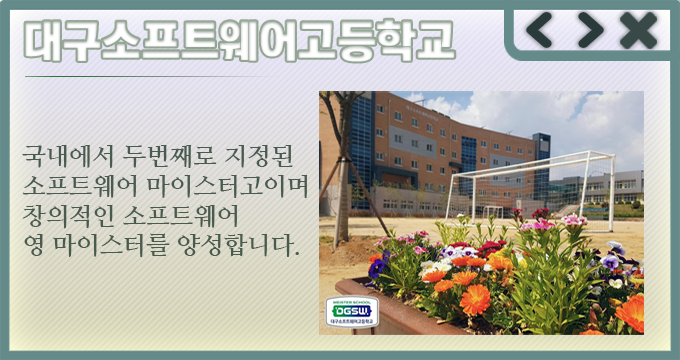
<style>
.page{position:relative;width:680px;height:360px}
.page>*{position:absolute;margin:0}
.t1{font:44px "KoreanTITGD5-R";letter-spacing:-0.01em;color:#ffffff}
.t2{font:24.7px "NanumMyeongjoBold";letter-spacing:-0.01em;color:#495a4e}
</style>
<div class="page">
<p class="t1" style="left:25px;top:19px;width:430px;height:43px">대구소프트웨어고등학교</p>
<p class="t2" style="left:22px;top:145px;width:286px;height:112px;text-align:right">국내에서 두번째로 지정된 소프트웨어 마이스터고이며 창의적인 소프트웨어<br>영 마이스터를 양성합니다.</p>
</div>
